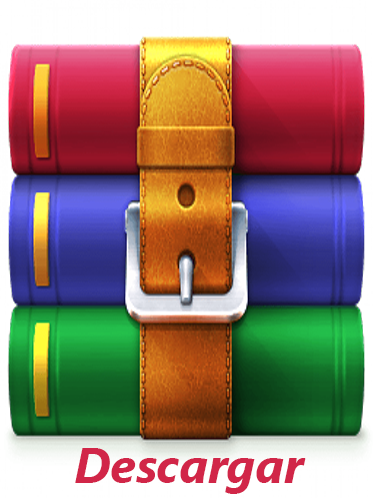
<style>
.page{position:relative;width:373px;height:498px}
.page>*{position:absolute;margin:0}
.t1{font:48.6px "SegoeUI-BoldItalic";color:#d12648}
</style>
<div class="page">
<p class="t1" style="left:75px;top:448px;width:231px;height:46px">Descargar</p>
</div>
